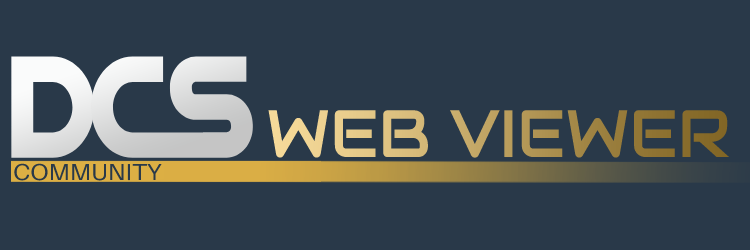
<style>
.page{position:relative;width:750px;height:250px;background:#293949}
.page>*{position:absolute;margin:0}
.t1{font:66.7px "Audiowide-Regular";scale:0.96 1}
.t2{font:23.3px "Aileron-Regular";color:#293949;scale:1.06 1}
</style>
<div class="page">
<p class="t1" style="left:268px;top:110px;width:462px;height:48px">WEB VIEWER</p>
<p class="t2" style="left:14px;top:163px;width:148px;height:18px">COMMUNITY</p>
</div>
